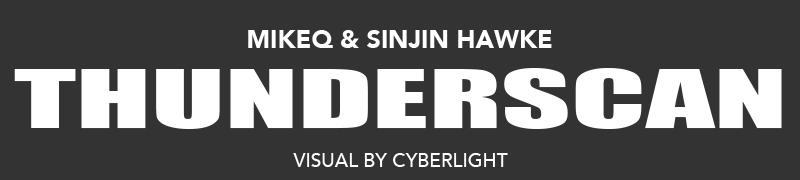
<style>
.page{position:relative;width:800px;height:180px;background:#333333}
.page>*{position:absolute;margin:0}
.t1{font:25px "Avenir-Black";color:#ffffff}
.t2{font:75px "Impact";color:#ffffff;scale:1.8 1}
.t3{font:18.7px "Avenir-Medium";color:#ffffff}
</style>
<div class="page">
<p class="t1" style="left:248px;top:30px;width:304px;height:18px">MIKEQ &amp; SINJIN HAWKE</p>
<p class="t2" style="left:14px;top:68px;width:768px;height:61px">THUNDERSCAN</p>
<p class="t3" style="left:293px;top:153px;width:215px;height:14px">VISUAL BY CYBERLIGHT</p>
</div>
